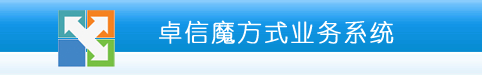
<style>
.page{position:relative;width:482px;height:75px}
.page>*{position:absolute;margin:0}
.t1{font:24px "YouYuan";letter-spacing:0.075em;color:#ffffff;font-weight:bold}
</style>
<div class="page">
<p class="t1" style="left:159px;top:20px;width:235px;height:24px">卓信魔方式业务系统</p>
</div>
